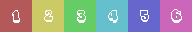
<style>
.page{position:relative;width:192px;height:32px}
.page>*{position:absolute;margin:0}
.t1{font:16px "BubblyHillsW00-Solid";color:#ffffff;scale:0.91 1}
</style>
<div class="page">
<p class="t1" style="left:12px;top:10px;width:8px;height:13px">1</p>
<p class="t1" style="left:44px;top:10px;width:9px;height:12px">2</p>
<p class="t1" style="left:77px;top:10px;width:9px;height:13px">3</p>
<p class="t1" style="left:108px;top:10px;width:10px;height:13px">4</p>
<p class="t1" style="left:140px;top:10px;width:9px;height:12px">5</p>
<p class="t1" style="left:171px;top:9px;width:11px;height:14px">6</p>
</div>
